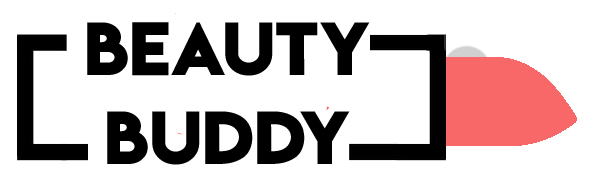
<style>
.page{position:relative;width:598px;height:182px;background:#ffffff}
.page>*{position:absolute;margin:0}
.t1{font:66.7px "LemonMilkbold";color:#000000;text-transform:uppercase}
</style>
<div class="page">
<p class="t1" style="left:87px;top:22px;width:283px;height:54px">BEAUTY</p>
<p class="t1" style="left:107px;top:111px;width:243px;height:54px">Buddy</p>
</div>
